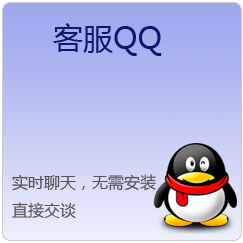
<style>
.page{position:relative;width:243px;height:243px}
.page>*{position:absolute;margin:0}
.t1{font:30px "MicrosoftYaHei";color:#0c1871}
.t2{font:16px "MicrosoftYaHei";color:#575252}
</style>
<div class="page">
<p class="t1" style="left:53px;top:23px;width:109px;height:33px">客服QQ</p>
<p class="t2" style="left:12px;top:174px;width:144px;height:44px">实时聊天，无需安装<br>直接交谈</p>
</div>
